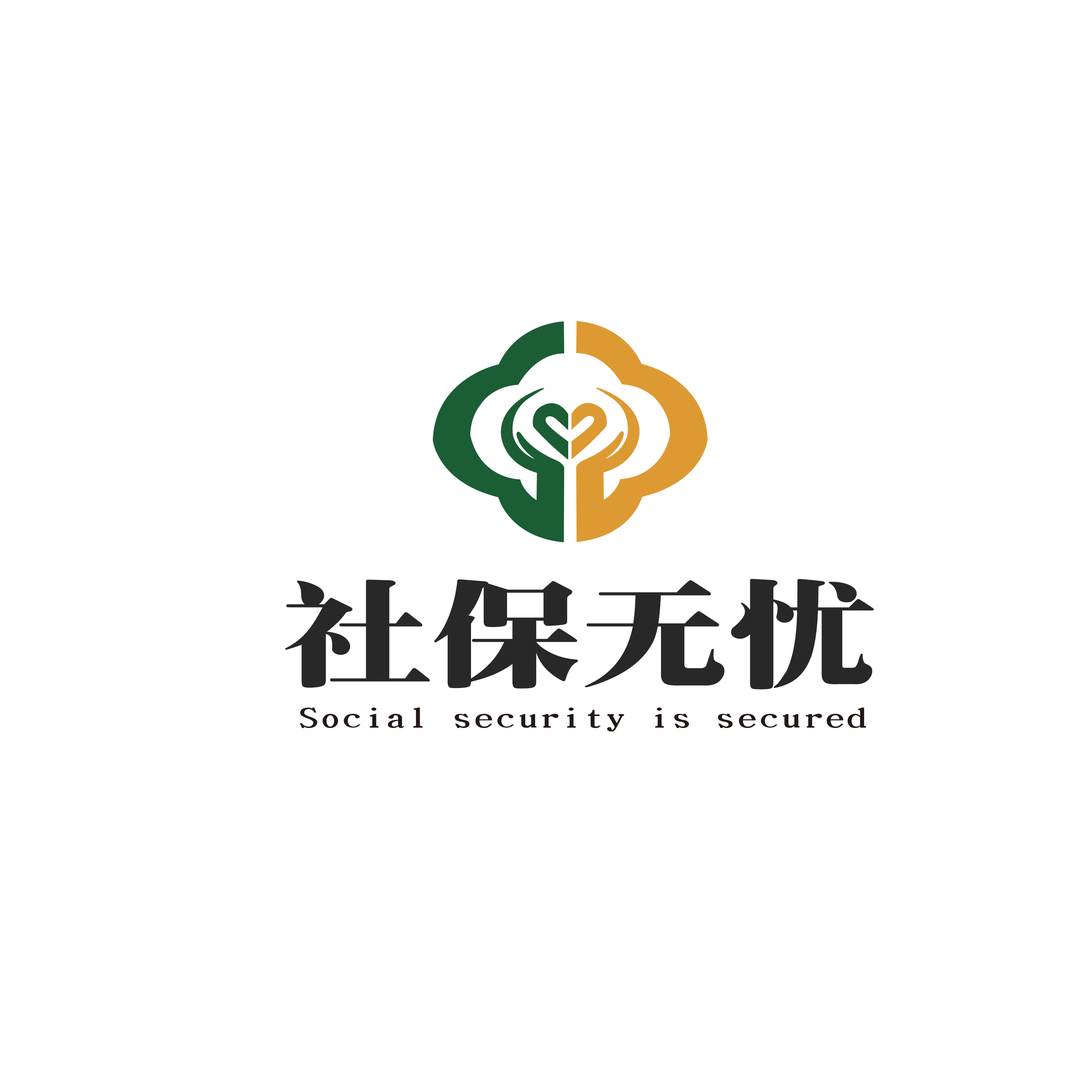
<style>
.page{position:relative;width:1092px;height:1092px;background:#ffffff}
.page>*{position:absolute;margin:0}
.t1{font:113.6px "SungtiEG-Ultra-?";color:#282828;scale:1.31 1}
.t2{font:27.8px "SungtiEG-Ultra-?";color:#231815;scale:1.58 1}
</style>
<div class="page">
<p class="t1" style="left:285px;top:579px;width:589px;height:110px">社保无忧</p>
<p class="t2" style="left:300px;top:707px;width:566px;height:25px">Social security is secured</p>
</div>
